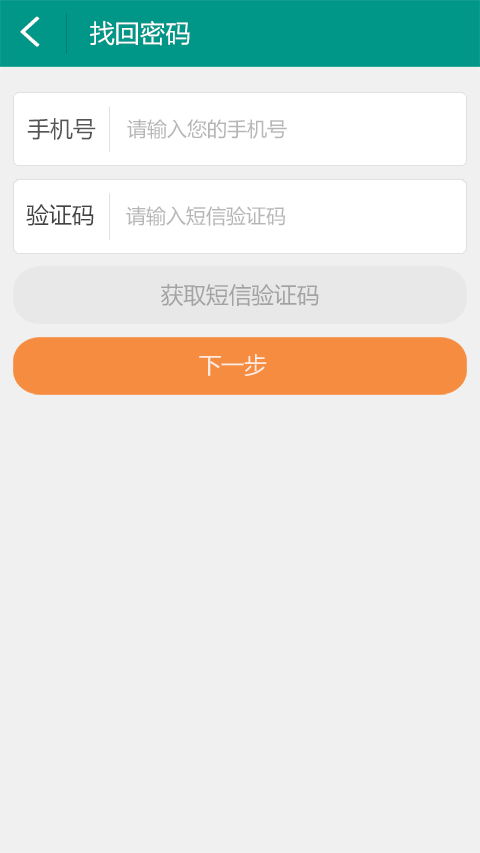
<style>
.page{position:relative;width:480px;height:853px;background:#f0f0f0}
.page>*{position:absolute;margin:0}
.t1{font:41.3px "SimHei";color:#ffffff;font-weight:bold}
.t2{font:25.3px "MicrosoftYaHei";color:#ffffff}
.t3{font:22.7px "MicrosoftYaHei";color:#555555}
.t4{font:20px "MicrosoftYaHei";color:#b6b6b6}
.t5{font:22.7px "MicrosoftYaHei";color:#444444}
.t6{font:22.7px "MicrosoftYaHei";color:#a3a3a3}
.t7{font:22.7px "MicrosoftYaHei";color:#fdebe2}
</style>
<div class="page">
<p class="t1" style="left:20px;top:16px;width:20px;height:31px">&lt;</p>
<p class="t2" style="left:90px;top:21px;width:100px;height:25px">找回密码</p>
<p class="t3" style="left:27px;top:118px;width:69px;height:22px">手机号</p>
<p class="t4" style="left:127px;top:119px;width:160px;height:20px">请输入您的手机号</p>
<p class="t5" style="left:26px;top:204px;width:68px;height:22px">验证码</p>
<p class="t4" style="left:126px;top:206px;width:159px;height:20px">请输入短信验证码</p>
<p class="t6" style="left:161px;top:284px;width:158px;height:22px">获取短信验证码</p>
<p class="t7" style="left:199px;top:354px;width:68px;height:23px">下一步</p>
</div>
